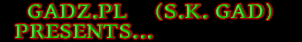
<style>
.page{position:relative;width:302px;height:42px;background:#000000}
.page>*{position:absolute;margin:0}
.t1{font:22px "GentiumBookBasic-Bold";scale:1.18 1}
.t2{font:22px "Alef-Regular";scale:1.18 1}
.t3{font:22px "GentiumBookBasic-Bold";scale:1.16 1}
</style>
<div class="page">
<p class="t1" style="left:28px;top:3px;width:244px;height:18px">GADZ.PL    <span class="t2">(</span>S.K. GAD<span class="t2">)</span></p>
<p class="t3" style="left:15px;top:24px;width:138px;height:15px">PRESENTS...</p>
</div>
